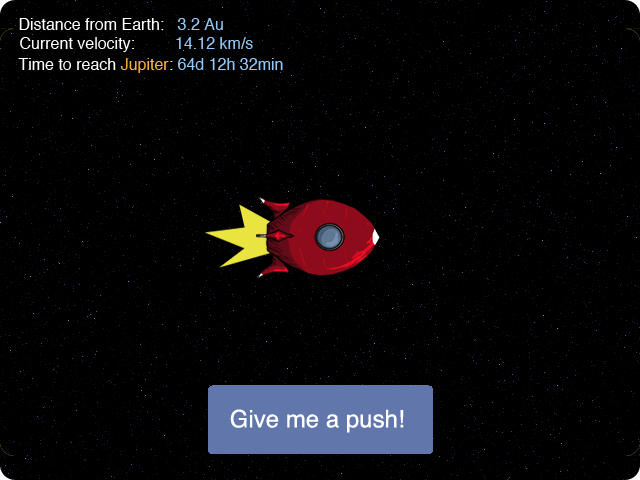
<style>
.page{position:relative;width:640px;height:480px;background:#000000}
.page>*{position:absolute;margin:0}
.t1{font:16px "Helvetica";color:#ffffff}
.t2{font:16px "Helvetica";color:#94c9f6}
.t3{font:16px "Helvetica";color:#feb23b}
.t4{font:24px "Helvetica";color:#ffffff}
</style>
<div class="page">
<p class="t1" style="left:19px;top:18px;width:204px;height:12px">Distance from Earth:   <span class="t2">3.2 Au</span></p>
<p class="t1" style="left:20px;top:37px;width:233px;height:15px">Current velocity:         <span class="t2">14.12 km/s</span></p>
<p class="t1" style="left:18px;top:58px;width:265px;height:15px">Time to reach <span class="t3">Jupiter</span>: <span class="t2">64d 12h 32min</span></p>
<p class="t4" style="left:230px;top:409px;width:174px;height:24px">Give me a push!</p>
</div>
